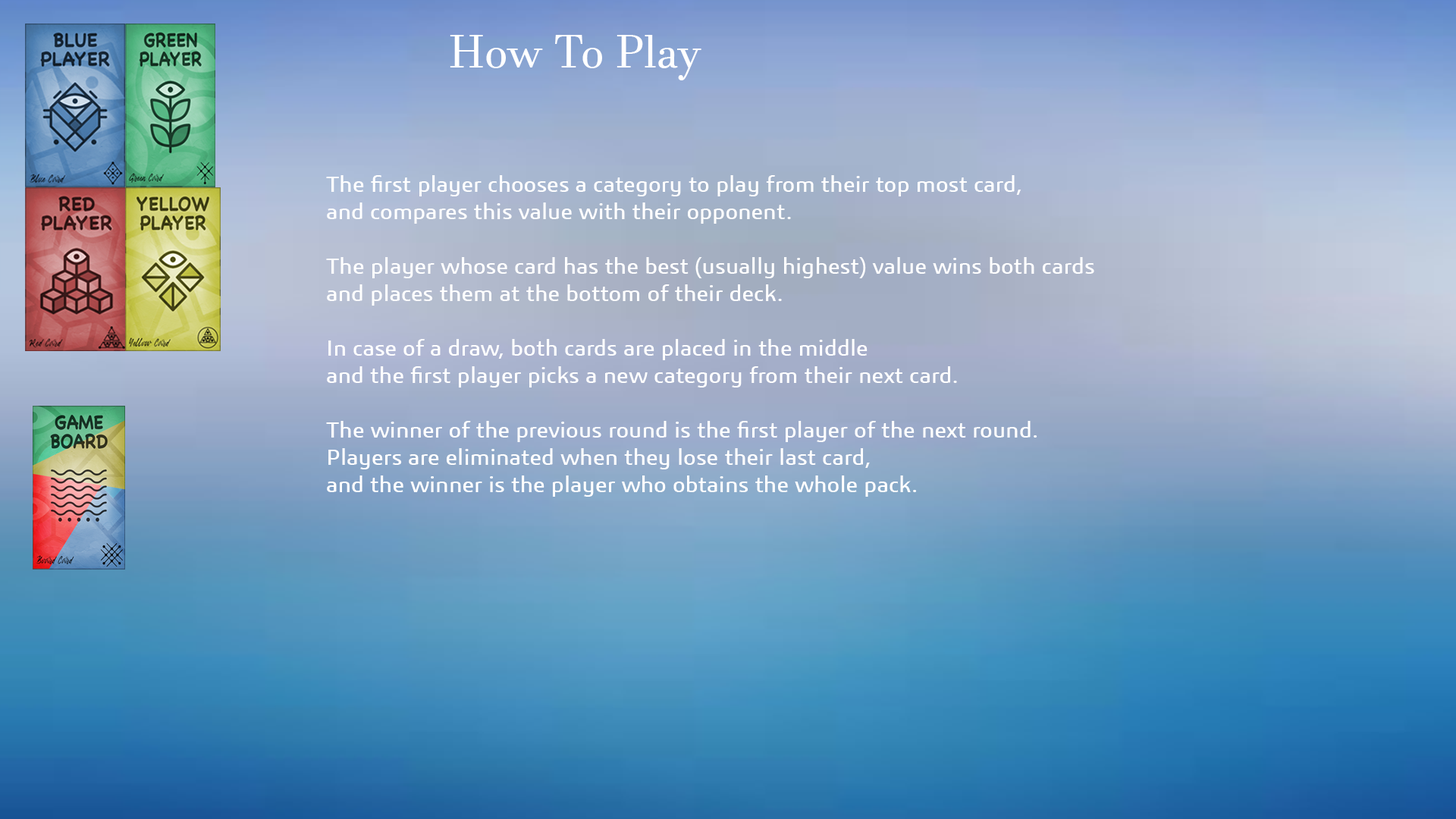
<style>
.page{position:relative;width:1456px;height:819px}
.page>*{position:absolute;margin:0}
.t1{font:45.5px "JavaneseText";color:#ffffff}
.t2{font:22.7px "3ds";color:#ffffff}
</style>
<div class="page">
<p class="t1" style="left:450px;top:35px;width:251px;height:45px">How To Play</p>
<p class="t2" style="left:326px;top:175px;width:768px;height:322px">The first player chooses a category to play from their top most card, <br>and compares this value with their opponent.<br><br>The player whose card has the best (usually highest) value wins both cards <br>and places them at the bottom of their deck.<br><br>In case of a draw, both cards are placed in the middle <br>and the first player picks a new category from their next card.<br><br>The winner of the previous round is the first player of the next round.<br>Players are eliminated when they lose their last card, <br>and the winner is the player who obtains the whole pack.</p>
</div>
